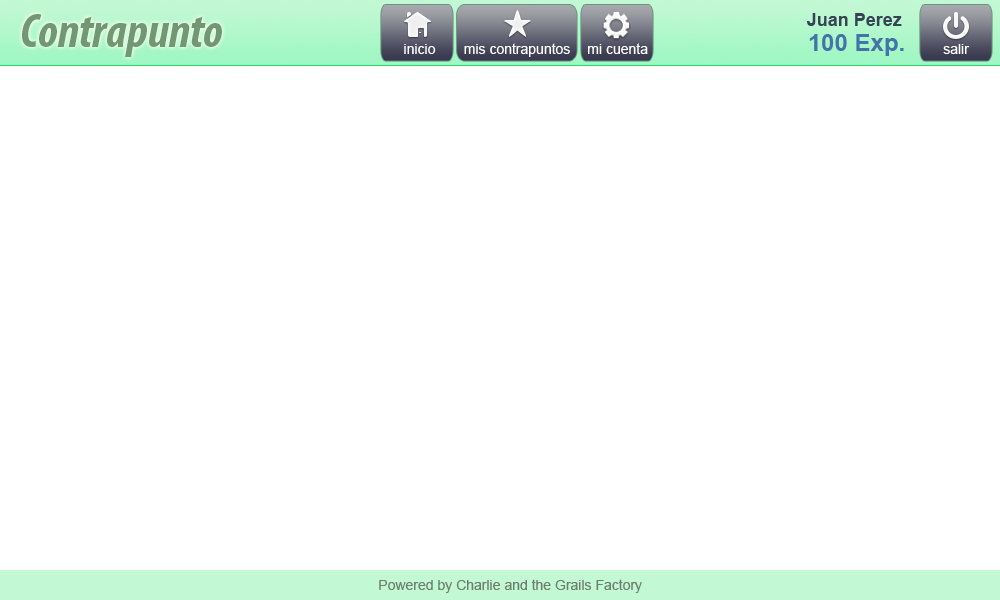
<style>
.page{position:relative;width:1000px;height:600px;background:#ffffff}
.page>*{position:absolute;margin:0}
.t1{font:48px "MyriadPro-BoldCondIt";color:#719773}
.t2{font:18px "Arial-BoldMT";color:#354352}
.t3{font:24px "Arial-BoldMT";color:#4373a8}
.t4{font:14px "ArialMT";color:#ffffff}
.t5{font:14px "ArialMT";color:#6e7f6f}
</style>
<div class="page">
<p class="t1" style="left:22px;top:14px;width:200px;height:43px">Contrapunto</p>
<p class="t2" style="left:807px;top:13px;width:95px;height:13px">Juan Perez</p>
<p class="t3" style="left:809px;top:34px;width:95px;height:22px">100 Exp.</p>
<p class="t4" style="left:404px;top:44px;width:32px;height:10px">inicio</p>
<p class="t4" style="left:464px;top:43px;width:106px;height:14px">mis contrapuntos</p>
<p class="t4" style="left:588px;top:43px;width:60px;height:11px">mi cuenta</p>
<p class="t4" style="left:943px;top:44px;width:27px;height:10px">salir</p>
<p class="t5" style="left:379px;top:579px;width:263px;height:14px">Powered by Charlie and the Grails Factory</p>
</div>
